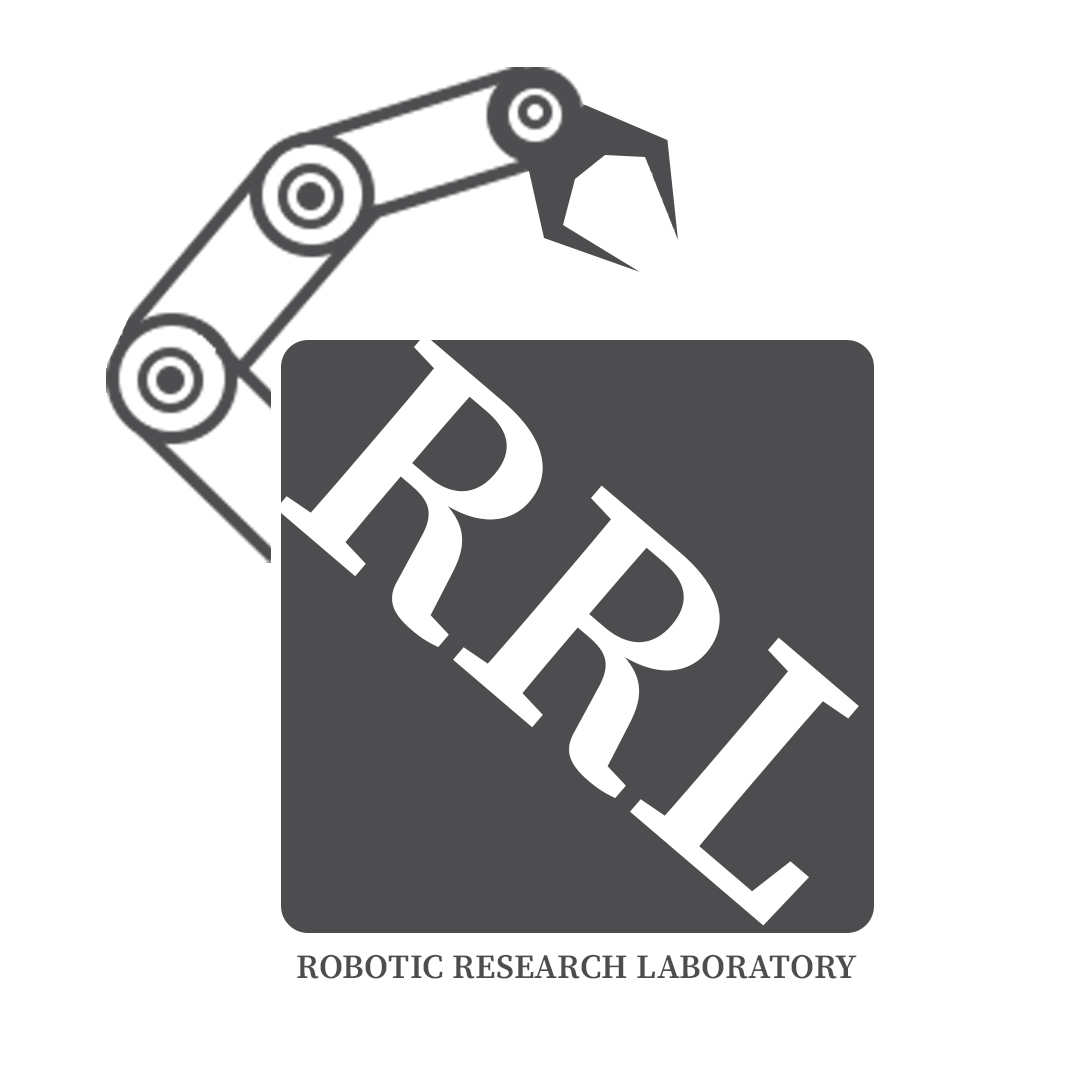
<style>
.page{position:relative;width:1080px;height:1080px;background:#ffffff}
.page>*{position:absolute;margin:0}
.t1{font:344.7px "SourceSerifRoman-Semibold";letter-spacing:0.01em;color:#ffffff}
.t2{font:34.1px "SourceSerifRoman-Semibold";letter-spacing:0.01em;color:#4d4d4f;text-transform:uppercase}
</style>
<div class="page">
<p class="t1" style="left:276px;top:334px;width:583px;height:592px;rotate:40deg">RRL</p>
<p class="t2" style="left:297px;top:954px;width:560px;height:25px">Robotic Research laboratory</p>
</div>
